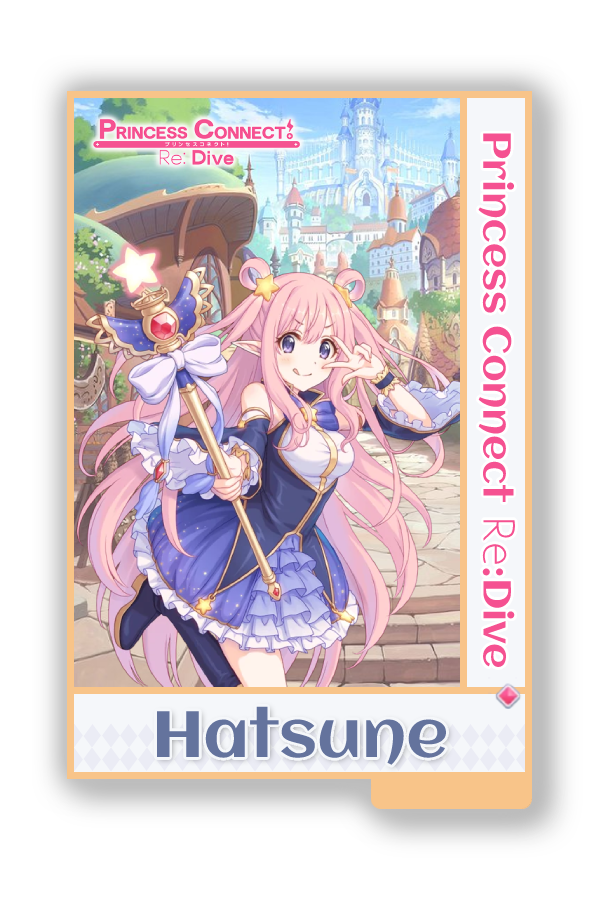
<style>
.page{position:relative;width:600px;height:900px;background:#ffffff}
.page>*{position:absolute;margin:0}
.t1{font:39px "Aclonica-Regular";color:#f55191}
.t2{font:39px "AaarghNormal";color:#f55191}
.t3{font:65px "Aclonica-Regular";color:#64739d}
</style>
<div class="page">
<p class="t1" style="left:478px;top:133px;width:38px;height:534px;rotate:90deg">Princess Connect <span class="t2">Re</span>:Dive</p>
<p class="t3" style="left:156px;top:706px;width:291px;height:59px">Hatsune</p>
</div>
